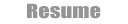
<style>
.page{position:relative;width:128px;height:24px;background:#ffffff}
.page>*{position:absolute;margin:0}
.t1{font:18px "Impact";color:#959494;scale:1.25 1}
</style>
<div class="page">
<p class="t1" style="left:27px;top:3px;width:74px;height:16px">Resume</p>
</div>
